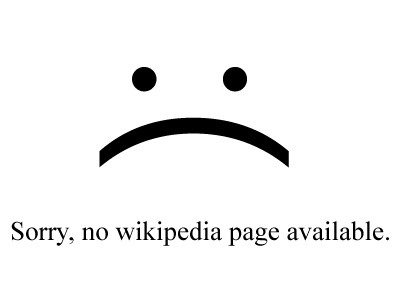
<style>
.page{position:relative;width:400px;height:300px;background:#ffffff}
.page>*{position:absolute;margin:0}
.t1{font:220px "NirmalaUI";color:#000000}
.t2{font:27px "TimesNewRomanPSMT";color:#000000}
</style>
<div class="page">
<p class="t1" style="left:99px;top:67px;width:190px;height:101px;rotate:90deg">:(</p>
<p class="t2" style="left:11px;top:221px;width:378px;height:25px">Sorry, no wikipedia page available.</p>
</div>
